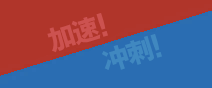
<style>
.page{position:relative;width:212px;height:88px;background:#2a6db2}
.page>*{position:absolute;margin:0}
.t1{font:28px "HYb9gj";letter-spacing:-0.1em;color:#cc5250}
.t2{font:33.3px "HYb9gj";letter-spacing:-0.1em;color:#cc5250}
.t3{font:28px "HYb9gj";letter-spacing:-0.1em;color:#4088c0}
.t4{font:33.3px "HYb9gj";letter-spacing:-0.1em;color:#4088c0}
</style>
<div class="page">
<p class="t1" style="left:47px;top:16px;width:54px;height:37px;rotate:-17deg">加速</p>
<p class="t2" style="left:96px;top:13px;width:12px;height:24px;rotate:-17deg">！</p>
<p class="t3" style="left:102px;top:35px;width:52px;height:35px;rotate:-17deg">冲刺</p>
<p class="t4" style="left:150px;top:34px;width:12px;height:24px;rotate:-17deg">！</p>
</div>
